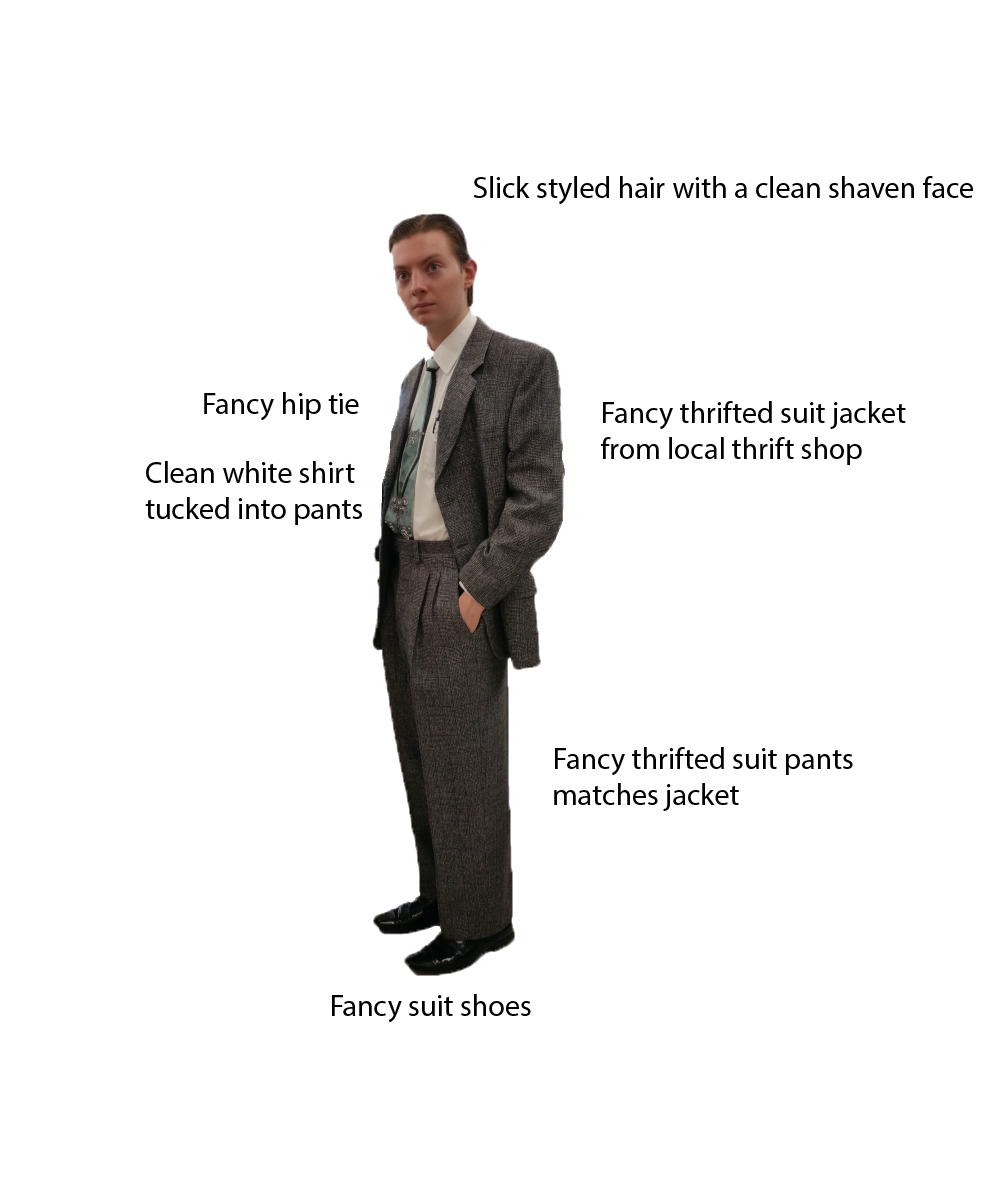
<style>
.page{position:relative;width:1000px;height:1193px;background:#ffffff}
.page>*{position:absolute;margin:0}
.t1{font:30px "MyriadPro-Regular";color:#000000}
</style>
<div class="page">
<p class="t1" style="left:473px;top:176px;width:500px;height:29px">Slick styled hair with a clean shaven face</p>
<p class="t1" style="left:204px;top:392px;width:155px;height:29px">Fancy hip tie</p>
<p class="t1" style="left:601px;top:401px;width:305px;height:64px">Fancy thrifted suit jacket <br>from local thrift shop</p>
<p class="t1" style="left:145px;top:461px;width:217px;height:64px">Clean white shirt<br>tucked into pants</p>
<p class="t1" style="left:554px;top:747px;width:299px;height:64px">Fancy thrifted suit pants <br>matches jacket</p>
<p class="t1" style="left:332px;top:994px;width:199px;height:29px">Fancy suit shoes</p>
</div>
